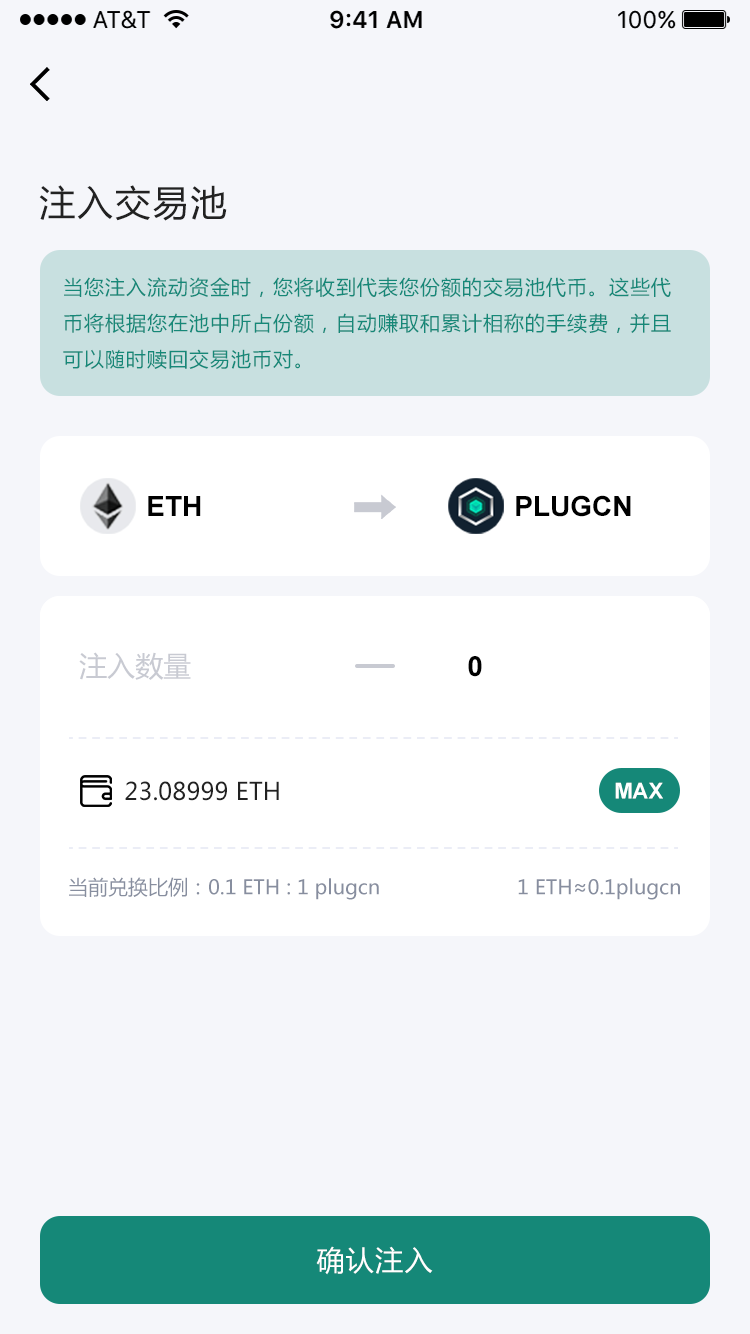
<style>
.page{position:relative;width:750px;height:1334px;background:#f5f6fa}
.page>*{position:absolute;margin:0}
.t1{font:36px "MicrosoftYaHei";letter-spacing:0.05em;color:#222222}
.t2{font:20px/36px "MicrosoftYaHei";letter-spacing:0.05em;color:#158878}
.t3{font:28px "Arial-BoldMT";color:#000000}
.t4{font:28px "MicrosoftYaHei";color:#c8cad2}
.t5{font:24px "MicrosoftYaHei";color:#222222}
.t6{font:22px "Arial-BoldMT";color:#ffffff}
.t7{font:20px "MicrosoftYaHei";color:#878e9f}
.t8{font:28px "MicrosoftYaHei";letter-spacing:0.05em;color:#ffffff}
</style>
<div class="page">
<p class="t1" style="left:39px;top:185px;width:188px;height:36px">注入交易池</p>
<p class="t2" style="left:63px;top:277px;width:608px;height:92px">当您注入流动资金时，您将收到代表您份额的交易池代币。这些代币将根据您在池中所占份额，自动赚取和累计相称的手续费，并且可以随时赎回交易池币对。</p>
<p class="t3" style="left:148px;top:496px;width:53px;height:20px">ETH</p>
<p class="t3" style="left:516px;top:495px;width:115px;height:22px">PLUGCN</p>
<p class="t4" style="left:79px;top:652px;width:112px;height:28px">注入数量</p>
<p class="t3" style="left:468px;top:656px;width:14px;height:21px">0</p>
<p class="t5" style="left:125px;top:781px;width:154px;height:20px">23.08999 ETH</p>
<p class="t6" style="left:615px;top:782px;width:48px;height:17px">MAX</p>
<p class="t7" style="left:69px;top:877px;width:310px;height:23px">当前兑换比例：0.1 ETH : 1 plugcn</p>
<p class="t7" style="left:518px;top:878px;width:162px;height:22px">1 ETH≈0.1plugcn</p>
<p class="t8" style="left:316px;top:1246px;width:117px;height:29px">确认注入</p>
</div>
